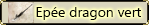
<style>
.page{position:relative;width:149px;height:25px}
.page>*{position:absolute;margin:0}
.t1{font:14px "LaoUI";color:#000000}
</style>
<div class="page">
<p class="t1" style="left:36px;top:7px;width:105px;height:13px">Epée dragon vert</p>
</div>
